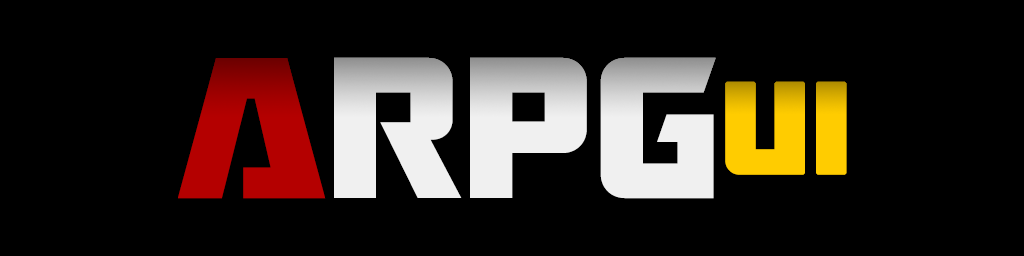
<style>
.page{position:relative;width:1024px;height:256px;background:#000000}
.page>*{position:absolute;margin:0}
.t1{font:200px "RobofanFree";color:#f0f0f0}
.t2{font:200px "RobofanFree";color:#b40000}
.t3{font:128px "RobofanFree";color:#ffcc00;font-weight:bold}
</style>
<div class="page">
<p class="t1" style="left:178px;top:57px;width:538px;height:142px"><span class="t2">A</span>RPG</p>
<p class="t3" style="left:725px;top:81px;width:122px;height:94px">UI</p>
</div>
